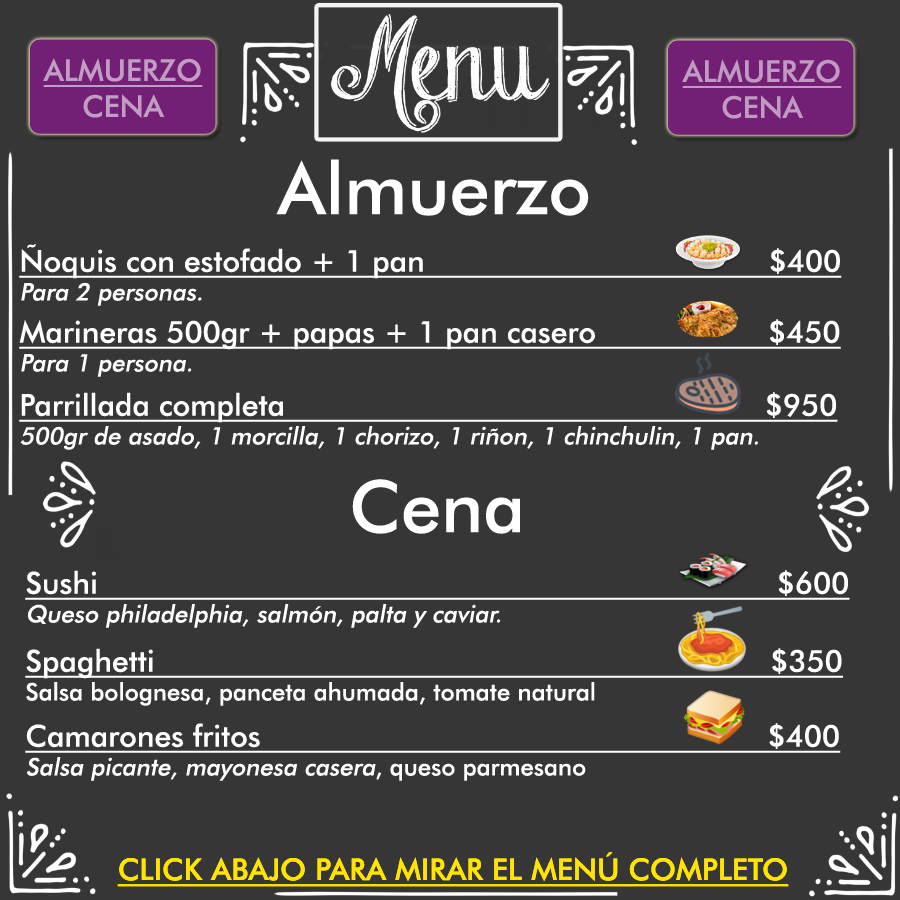
<style>
.page{position:relative;width:900px;height:900px;background:#363636}
.page>*{position:absolute;margin:0}
.t1{font:30px "FuturaBT-Medium";color:#c29dc3;text-transform:uppercase;text-decoration:underline}
.t2{font:30px "FuturaBT-Medium";color:#c29dc3;text-transform:uppercase}
.t3{font:30px "FuturaBT-Medium";color:#c09ac1;text-transform:uppercase;text-decoration:underline}
.t4{font:30px "FuturaBT-Medium";color:#c09ac1;text-transform:uppercase}
.t5{font:72px "FuturaBT-Medium";color:#ffffff}
.t6{font:30px "FuturaBT-Medium";color:#ffffff;text-decoration:underline}
.t7{font:24px "FuturaBT-Medium";color:#ffffff;font-style:italic}
.t8{font:24px "FuturaBT-Medium";color:#ffffff}
.t9{font:30px "FuturaBT-Medium";color:#ffe400;text-transform:uppercase;text-decoration:underline}
</style>
<div class="page">
<p class="t1" style="left:43px;top:58px;width:160px;height:60px;text-align:center">ALMUERZO<br><span class="t2">CENA</span></p>
<p class="t3" style="left:682px;top:59px;width:160px;height:60px;text-align:center">ALMUERZO<br><span class="t4">CENA</span></p>
<p class="t5" style="left:276px;top:159px;width:313px;height:57px">Almuerzo</p>
<p class="t6" style="left:19px;top:244px;width:823px;height:62px">Ñoquis con estofado + 1 pan                                      $400<br><span class="t7">Para 2 personas.</span></p>
<p class="t6" style="left:19px;top:319px;width:822px;height:58px">Marineras 500gr + papas + 1 pan casero                   $450<br><span class="t7">Para 1 persona.</span></p>
<p class="t6" style="left:19px;top:392px;width:819px;height:58px">Parrillada completa                                                     $950<br><span class="t7">500gr de asado, 1 morcilla, 1 chorizo, 1 riñon, 1 chinchulin, 1 pan.</span></p>
<p class="t5" style="left:352px;top:479px;width:168px;height:55px">Cena</p>
<p class="t6" style="left:25px;top:570px;width:825px;height:58px">Sushi                                                                           $600<br><span class="t7">Queso philadelphia, salmón, palta y caviar.</span></p>
<p class="t6" style="left:25px;top:648px;width:818px;height:58px">Spaghetti                                                                    $350<br><span class="t8">Salsa bolognesa, panceta ahumada, tomate natural</span></p>
<p class="t6" style="left:25px;top:723px;width:816px;height:58px">Camarones fritos                                                        $400<br><span class="t7">Salsa picante, mayonesa casera</span><span class="t8">, queso parmesano</span></p>
<p class="t9" style="left:117px;top:852px;width:672px;height:35px">click abajo para mirar el menú completo</p>
</div>
